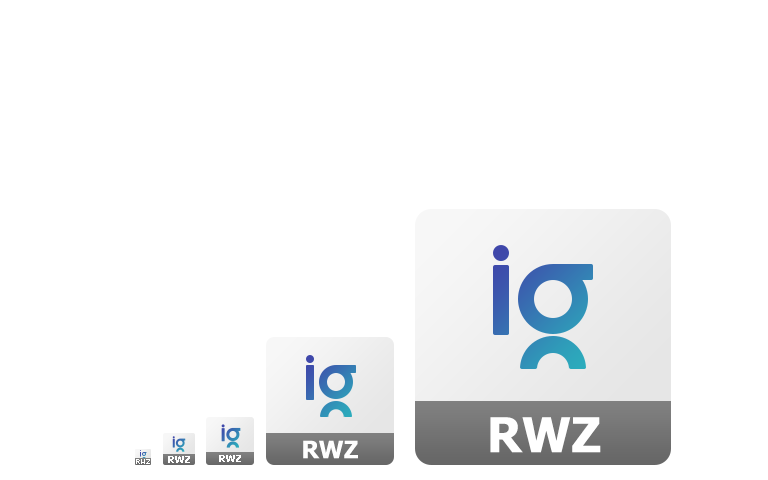
<style>
.page{position:relative;width:768px;height:480px;background:#ffffff}
.page>*{position:absolute;margin:0}
.t1{font:48px "Tahoma-Bold";color:#ffffff}
.t2{font:24px "Tahoma-Bold";color:#ffffff}
.t3{font:10px "Tahoma-Bold";color:#ffffff}
</style>
<div class="page">
<p class="t1" style="left:490px;top:417px;width:111px;height:36px">RWZ</p>
<p class="t2" style="left:303px;top:440px;width:55px;height:19px">RWZ</p>
<p class="t3" style="left:168px;top:456px;width:22px;height:7px">RWZ</p>
<p class="t3" style="left:219px;top:455px;width:22px;height:7px">RWZ</p>
</div>
